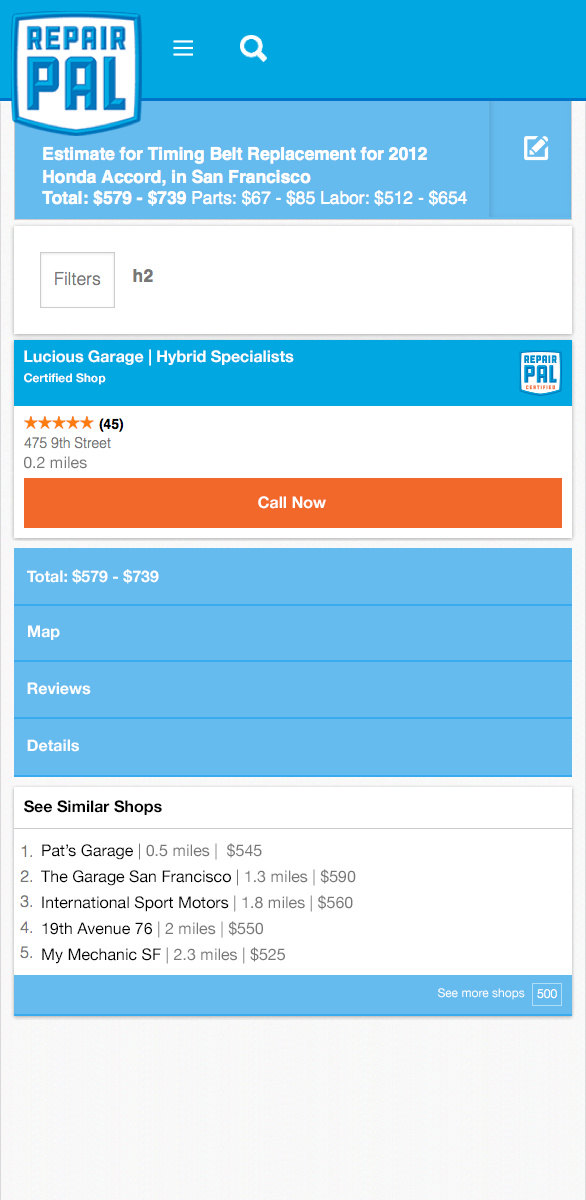
<style>
.page{position:relative;width:586px;height:1200px;background:#ffffff}
.page>*{position:absolute;margin:0}
.t1{font:16px "HelveticaNeue-Bold";color:#ffffff}
.t2{font:12px "HelveticaNeue-Bold";color:#ffffff}
.t3{font:16px "HelveticaNeue";color:#777777}
.t4{font:16px "HelveticaNeue-Bold";color:#000000}
.t5{font:16px "HelveticaNeue";color:#000000}
.t6{font:12px "HelveticaNeue";color:#ffffff}
</style>
<div class="page">
<p class="t1" style="left:24px;top:349px;width:270px;height:17px">Lucious Garage | Hybrid Specialists</p>
<p class="t2" style="left:24px;top:373px;width:82px;height:12px">Certified Shop</p>
<p class="t3" style="left:24px;top:456px;width:63px;height:13px">0.2 miles</p>
<p class="t1" style="left:258px;top:496px;width:68px;height:13px">Call Now</p>
<p class="t1" style="left:27px;top:569px;width:132px;height:15px">Total: $579 - $739</p>
<p class="t1" style="left:28px;top:625px;width:32px;height:15px">Map</p>
<p class="t1" style="left:27px;top:682px;width:64px;height:13px">Reviews</p>
<p class="t1" style="left:27px;top:739px;width:52px;height:13px">Details</p>
<p class="t4" style="left:24px;top:800px;width:138px;height:15px">See Similar Shops</p>
<p class="t3" style="left:42px;top:843px;width:220px;height:17px"><span class="t5">Pat’s Garage </span>| 0.5 miles |  $545</p>
<p class="t5" style="left:41px;top:869px;width:315px;height:17px">The Garage San Francisco <span class="t3">| 1.3 miles | $590</span></p>
<p class="t5" style="left:42px;top:895px;width:311px;height:17px">International Sport Motors <span class="t3">| 1.8 miles | $560</span></p>
<p class="t3" style="left:42px;top:921px;width:221px;height:17px"><span class="t5">19th Avenue 76 </span>| 2 miles | $550</p>
<p class="t3" style="left:42px;top:947px;width:243px;height:17px"><span class="t5">My Mechanic SF </span>| 2.3 miles | $525</p>
<p class="t6" style="left:438px;top:988px;width:87px;height:12px">See more shops</p>
</div>
